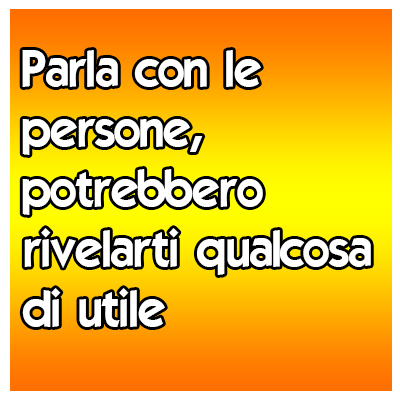
<style>
.page{position:relative;width:400px;height:400px}
.page>*{position:absolute;margin:0}
.t1{font:50px "ELEGANCE";color:#ffffff}
</style>
<div class="page">
<p class="t1" style="left:22px;top:50px;width:349px;height:277px">Parla con le<br>persone,<br>potrebbero<br>rivelarti qualcosa<br>di utile</p>
</div>
